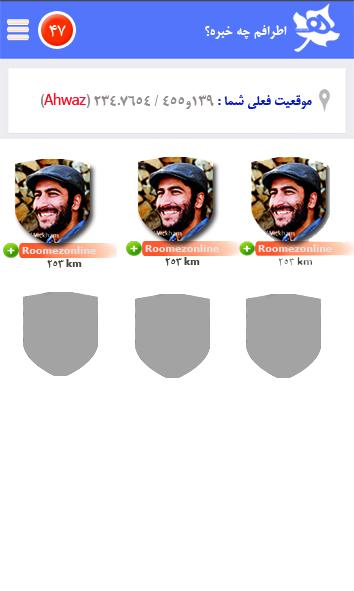
<style>
.page{position:relative;width:354px;height:591px;background:#ffffff}
.page>*{position:absolute;margin:0}
.t1{font:20.8px "BMitra";color:#ffffff}
.t2{font:14.6px "BMitraBold";color:#ffffff}
.t3{font:14.6px "BMitraBold";color:#918b8b}
.t4{font:14.6px "BMitraBold";color:#860e0e}
.t5{font:14.6px "BMitraBold";color:#0b1cbd}
.t6{font:14.6px "BKamran";color:#f50e24}
.t7{font:10.4px "BMitraBold";color:#e4e3e3}
.t8{font:10.4px "BMitraBold";color:#4b493c}
</style>
<div class="page">
<p class="t1" style="left:49px;top:25px;width:17px;height:12px">47</p>
<p class="t2" style="left:205px;top:25px;width:82px;height:14px">اطرافم چه خبره؟</p>
<p class="t3" style="left:41px;top:93px;width:271px;height:16px"><span class="t4">  </span><span class="t5">موقعيت فعلي شما : </span>139و455 / 234.7654 (<span class="t6">Ahwaz</span>)</p>
<p class="t7" style="left:22px;top:246px;width:74px;height:8px">Roomezonline</p>
<p class="t8" style="left:47px;top:259px;width:35px;height:9px">253 km</p>
</div>
